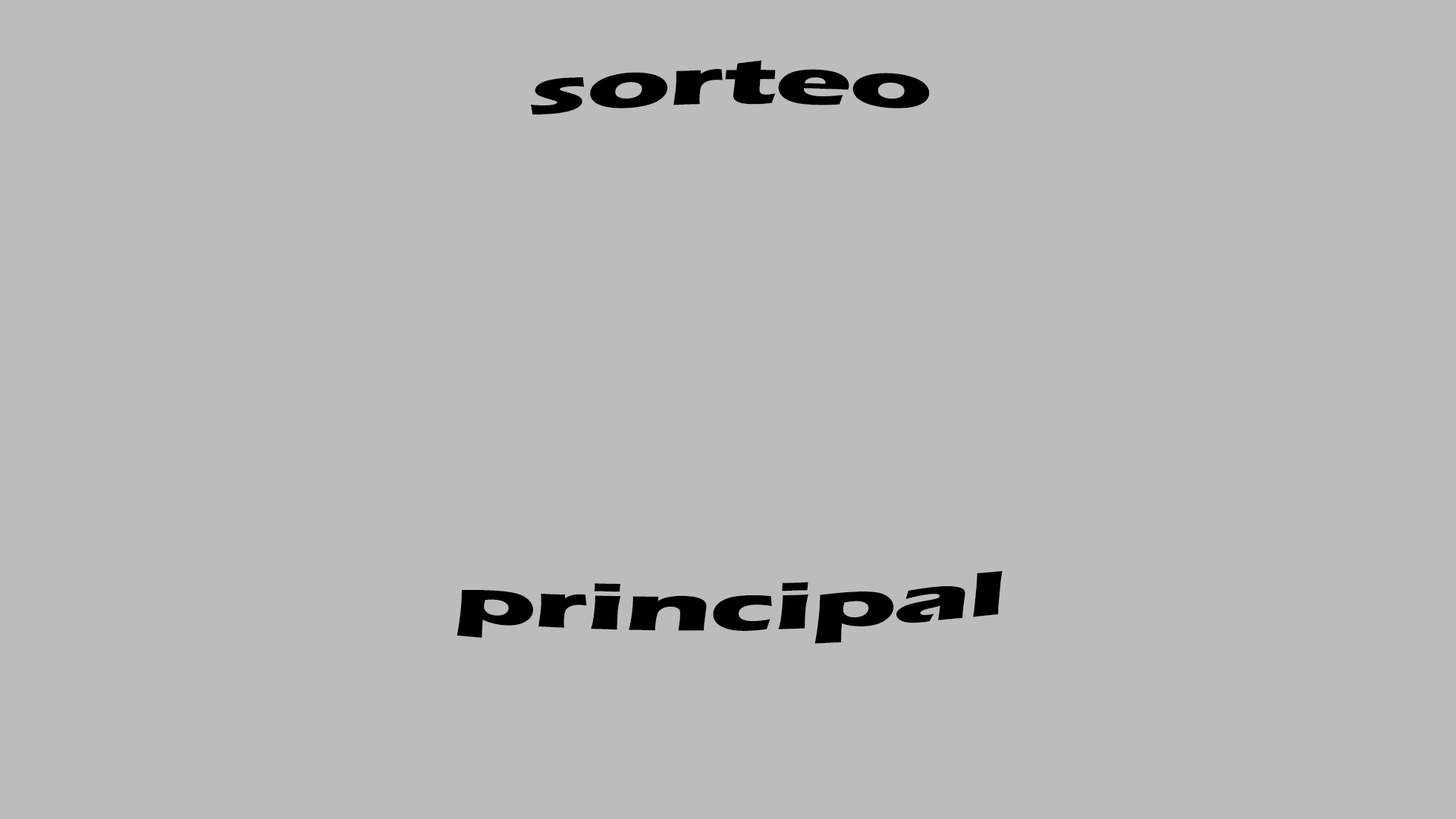
<style>
.page{position:relative;width:1456px;height:819px;background:#bcbcbc}
.page>*{position:absolute;margin:0}
.t1{font:51.9px/402.8px "ErasITC-Bold";letter-spacing:-0.02em;color:#000000;scale:2.32 1}
</style>
<div class="page">
<p class="t1" style="left:457px;top:60px;width:546px;height:584px;text-align:center;rotate:-1deg">sorteo <br>principal</p>
</div>
